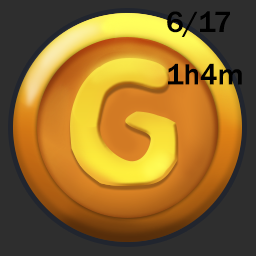
<style>
.page{position:relative;width:256px;height:256px;background:#2e2e2e}
.page>*{position:absolute;margin:0}
.t1{font:30px "FranklinGothic-Medium";color:#000000}
</style>
<div class="page">
<p class="t1" style="left:167px;top:11px;width:75px;height:74px">6/17<br>1h4m</p>
</div>
